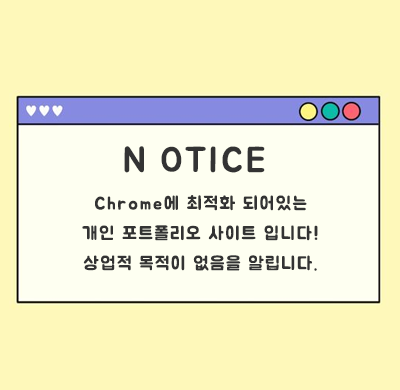
<style>
.page{position:relative;width:400px;height:390px;background:#fef8ba}
.page>*{position:absolute;margin:0}
.t1{font:36px "BMJUA";letter-spacing:0.075em;color:#333333}
.t2{font:18px/30px "BMJUA";letter-spacing:0.1em;color:#333333}
</style>
<div class="page">
<p class="t1" style="left:124px;top:146px;width:141px;height:27px">N OTICE</p>
<p class="t2" style="left:82px;top:195px;width:236px;height:76px;text-align:center">Chrome에 최적화 되어있는<br>개인 포트폴리오 사이트 입니다!<br>상업적 목적이 없음을 알립니다.</p>
</div>
